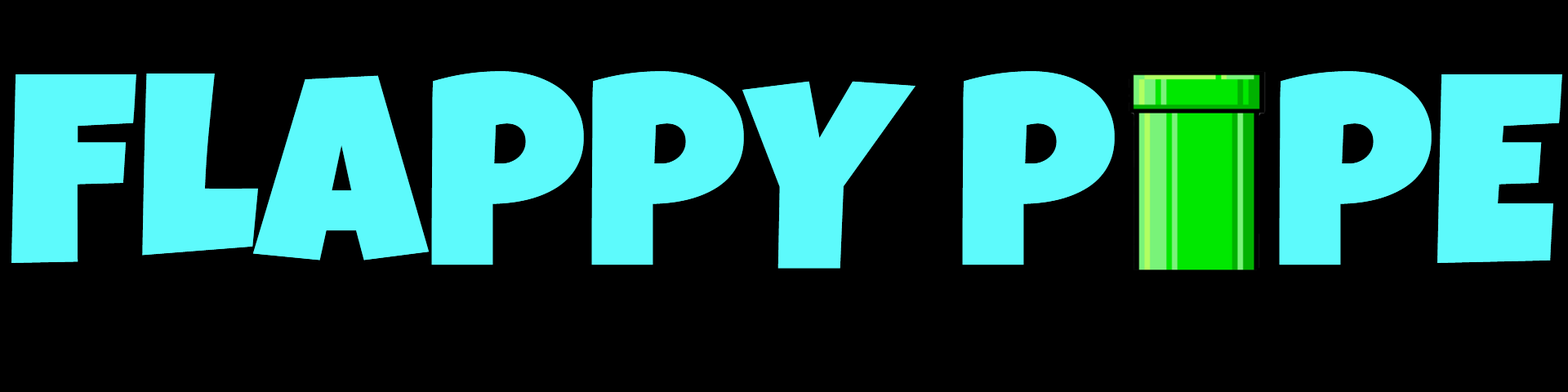
<style>
.page{position:relative;width:1568px;height:392px;background:#000000}
.page>*{position:absolute;margin:0}
.t1{font:267.9px "LuckiestGuy-Regular";color:#5dfafc}
</style>
<div class="page">
<p class="t1" style="left:11px;top:71px;width:1551px;height:198px">FLAPPY P   PE</p>
</div>
